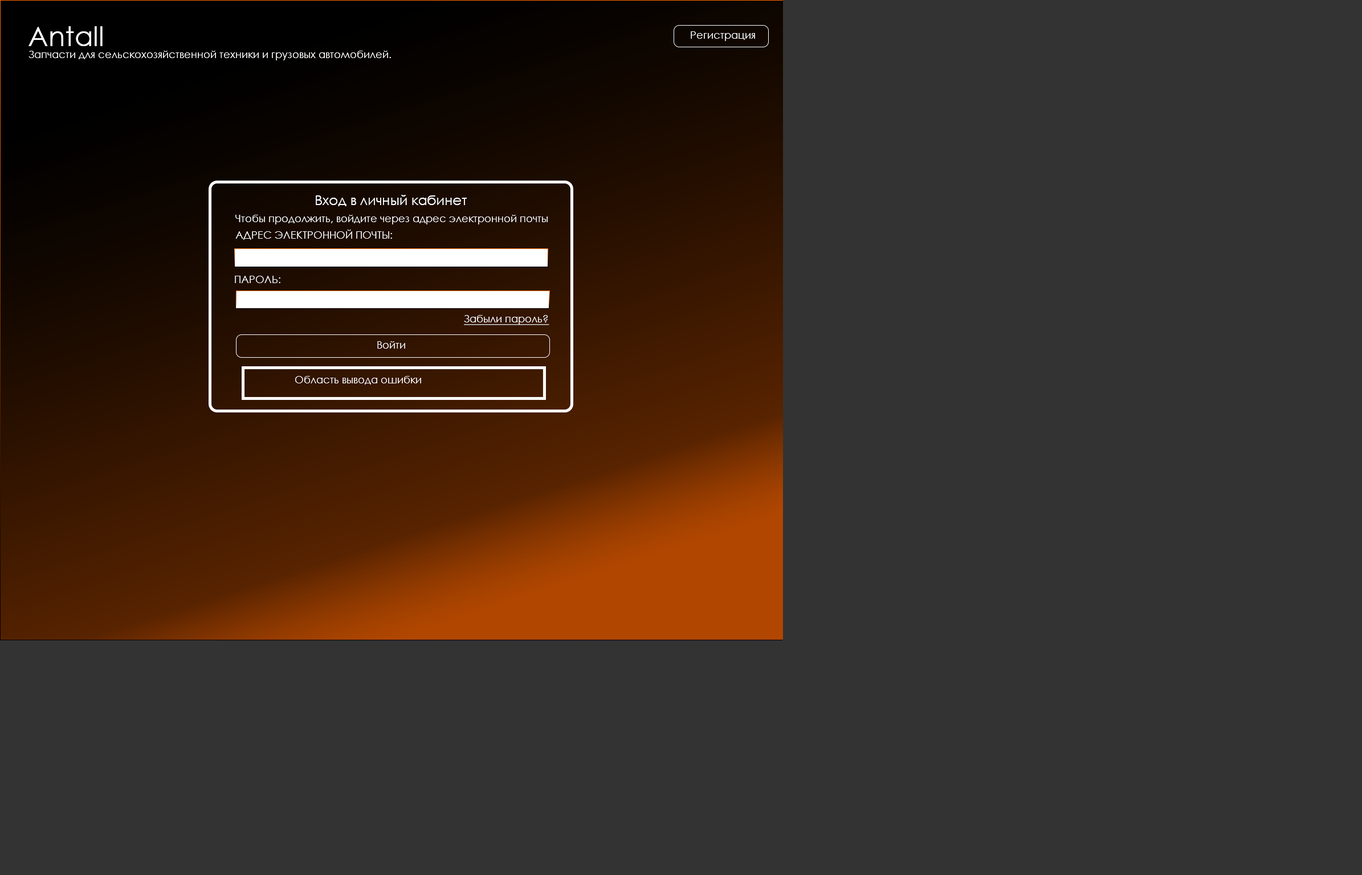
<style>
.page{position:relative;width:1362px;height:875px;background:#333333}
.page>*{position:absolute;margin:0}
.t1{font:27.4px "CenturyGothic";color:#ffffff}
.t2{font:10.3px "CenturyGothic";color:#ffffff}
.t3{font:13.6px "CenturyGothic";color:#ffffff}
.t4{font:10.3px "CenturyGothic";color:#ffffff;text-decoration:underline}
</style>
<div class="page">
<p class="t1" style="left:28px;top:26px;width:75px;height:20px">Antall</p>
<p class="t2" style="left:691px;top:31px;width:64px;height:10px">Регистрация</p>
<p class="t2" style="left:28px;top:51px;width:363px;height:9px">Запчасти для сельскохозяйственной техники и грузовых автомобилей.</p>
<p class="t3" style="left:316px;top:195px;width:151px;height:11px">Вход в личный кабинет</p>
<p class="t2" style="left:235px;top:215px;width:313px;height:10px">Чтобы продолжить, войдите через адрес электронной почты</p>
<p class="t2" style="left:235px;top:230px;width:157px;height:10px">АДРЕС ЭЛЕКТРОННОЙ ПОЧТЫ:</p>
<p class="t2" style="left:235px;top:276px;width:45px;height:7px">ПАРОЛЬ:</p>
<p class="t4" style="left:464px;top:315px;width:85px;height:10px">Забыли пароль?</p>
<p class="t2" style="left:377px;top:341px;width:28px;height:8px">Войти</p>
<p class="t2" style="left:295px;top:376px;width:126px;height:9px">Область вывода ошибки</p>
</div>
